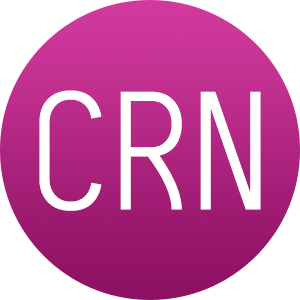
<style>
.page{position:relative;width:300px;height:300px;background:#ffffff}
.page>*{position:absolute;margin:0}
.t1{font:160px "Iosevka-Light";color:#ffffff}
</style>
<div class="page">
<p class="t1" style="left:39px;top:90px;width:222px;height:121px">CRN</p>
</div>
